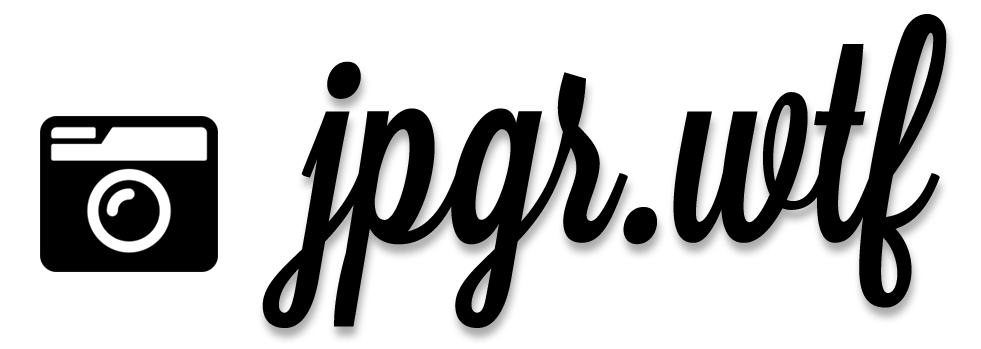
<style>
.page{position:relative;width:981px;height:349px;background:#ffffff}
.page>*{position:absolute;margin:0}
.t1{font:284.8px "Lavanderia-Sturdy";color:#000000}
</style>
<div class="page">
<p class="t1" style="left:262px;top:14px;width:685px;height:314px">jpgr.wtf</p>
</div>
